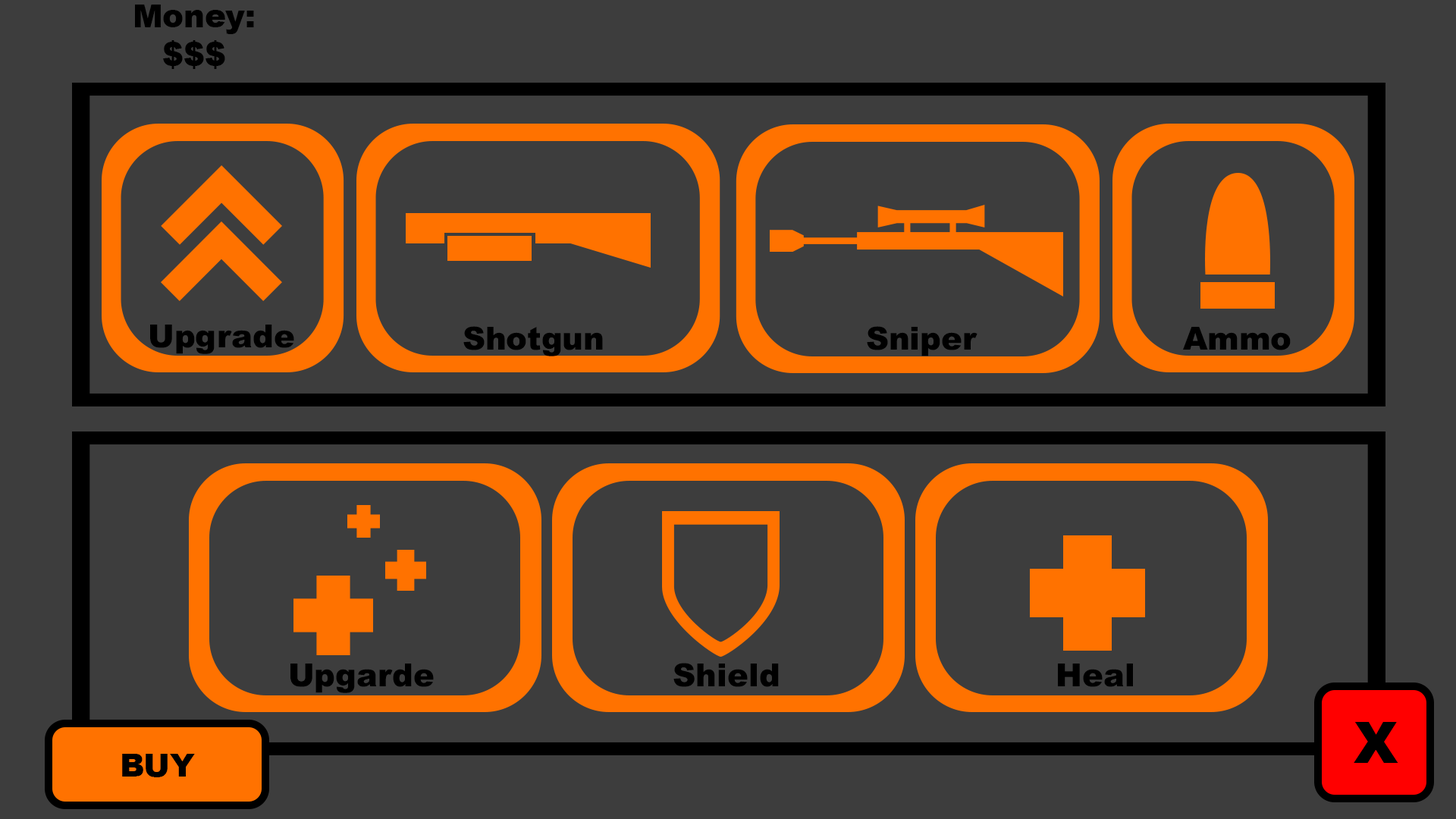
<style>
.page{position:relative;width:1456px;height:819px;background:#3d3d3d}
.page>*{position:absolute;margin:0}
.t1{font:31.6px "Arial-Black";color:#000000}
.t2{font:31.9px "Arial-Black";color:#000000}
.t3{font:56.9px "Arial-Black";color:#000000}
</style>
<div class="page">
<p class="t1" style="left:135px;top:5px;width:119px;height:64px;text-align:center">Money:<br>$$$</p>
<p class="t1" style="left:150px;top:325px;width:144px;height:29px">Upgrade</p>
<p class="t1" style="left:463px;top:326px;width:140px;height:30px">Shotgun</p>
<p class="t1" style="left:867px;top:326px;width:110px;height:30px">Sniper</p>
<p class="t1" style="left:1183px;top:327px;width:108px;height:23px">Ammo</p>
<p class="t2" style="left:290px;top:664px;width:144px;height:29px">Upgarde</p>
<p class="t2" style="left:673px;top:663px;width:106px;height:24px">Shield</p>
<p class="t2" style="left:1058px;top:664px;width:75px;height:23px">Heal</p>
<p class="t3" style="left:1354px;top:722px;width:44px;height:41px">X</p>
<p class="t1" style="left:122px;top:754px;width:73px;height:23px">BUY</p>
</div>
